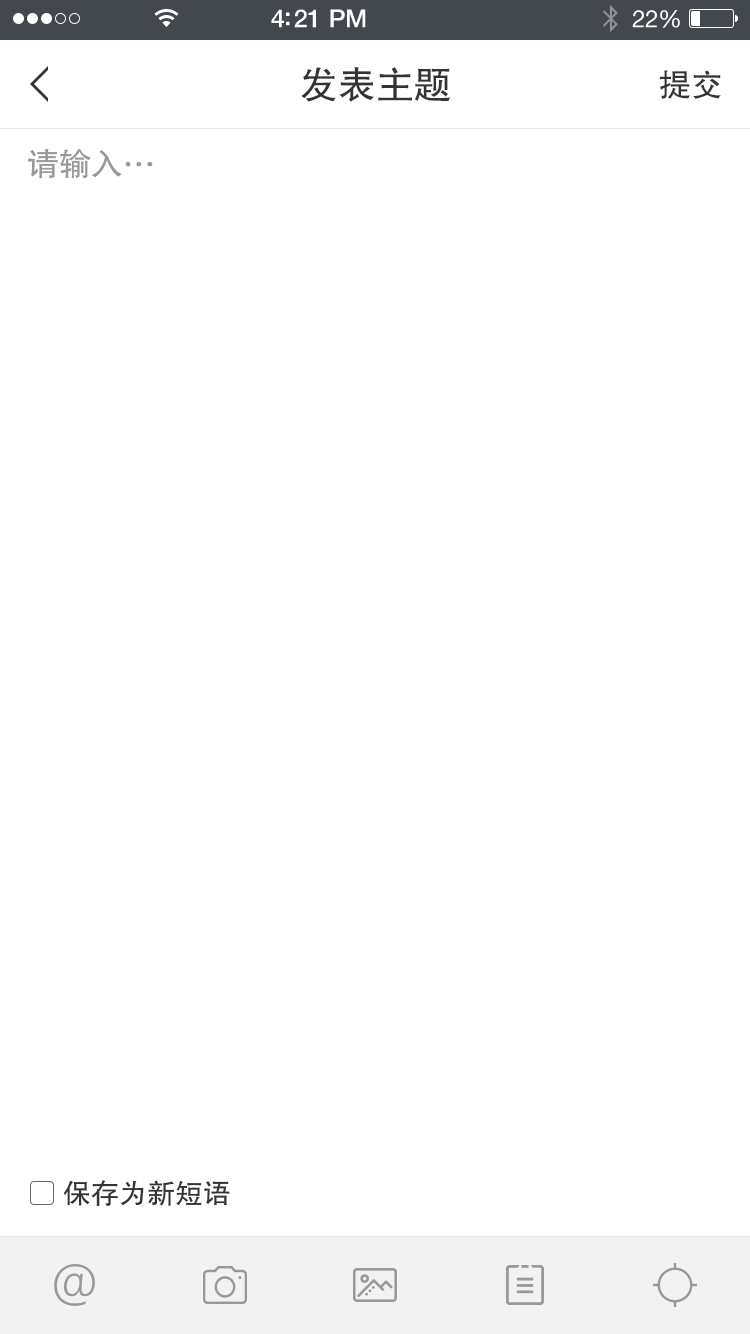
<style>
.page{position:relative;width:750px;height:1334px;background:#ffffff}
.page>*{position:absolute;margin:0}
.t1{font:38px "FZHTJW--GB1-0";color:#333333}
.t2{font:32px "FZHTJW--GB1-0";color:#333333}
.t3{font:32px "FZHTJW--GB1-0";color:#999999}
.t4{font:28px "FZHTJW--GB1-0";color:#333333}
.t5{font:48px "FZDX--GB1-4";color:#999999}
</style>
<div class="page">
<p class="t1" style="left:301px;top:67px;width:150px;height:35px">发表主题</p>
<p class="t2" style="left:660px;top:70px;width:61px;height:29px">提交</p>
<p class="t3" style="left:28px;top:149px;width:125px;height:30px">请输入…</p>
<p class="t4" style="left:63px;top:1180px;width:167px;height:26px">保存为新短语</p>
<p class="t5" style="left:54px;top:1264px;width:41px;height:42px">@</p>
</div>
